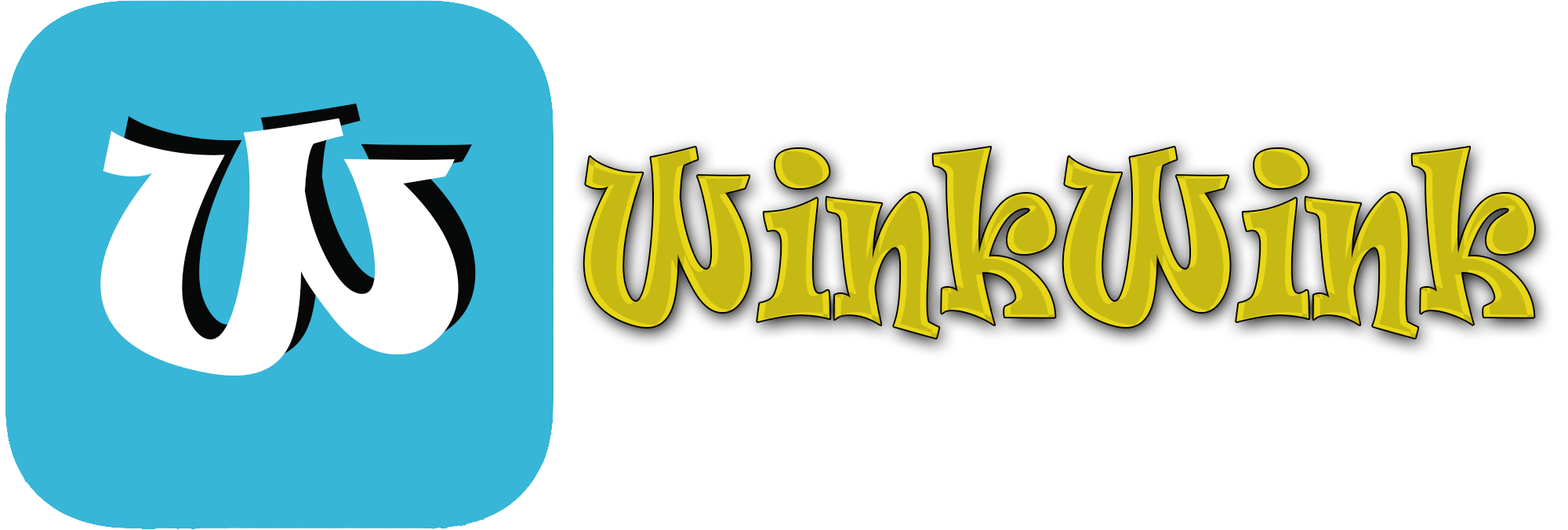
<style>
.page{position:relative;width:1568px;height:530px;background:#ffffff}
.page>*{position:absolute;margin:0}
.t1{font:302.3px "Ravie";color:#ffffff}
.t2{font:210.5px "Ravie";scale:0.67 1}
</style>
<div class="page">
<p class="t1" style="left:100px;top:118px;width:359px;height:258px">W</p>
<p class="t2" style="left:584px;top:147px;width:950px;height:191px">WinkWink</p>
</div>
